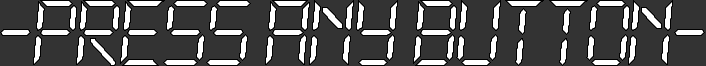
<style>
.page{position:relative;width:706px;height:66px;background:#333333}
.page>*{position:absolute;margin:0}
.t1{font:104.2px "DS-Digital-Italic";letter-spacing:-0.075em;color:#ffffff}
</style>
<div class="page">
<p class="t1" style="left:0px;top:0px;width:705px;height:66px">-press any button-</p>
</div>
